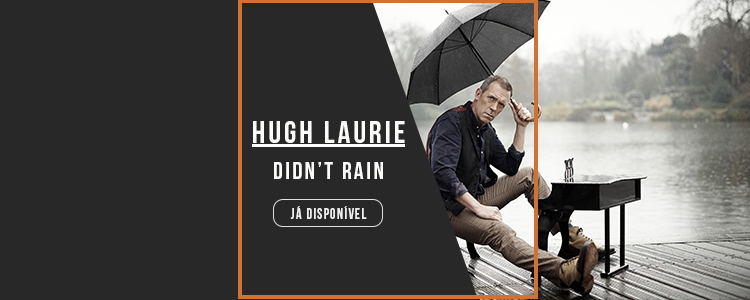
<style>
.page{position:relative;width:750px;height:300px;background:#282828}
.page>*{position:absolute;margin:0}
.t1{font:31.4px "BebasNeue";letter-spacing:0.1em;color:#fcfcfa}
.t2{font:24.3px "BebasNeue";letter-spacing:0.1em;color:#fcfcfa}
.t3{font:15.1px "BebasNeue";letter-spacing:0.1em;color:#efeeee;scale:0.9 1}
</style>
<div class="page">
<p class="t1" style="left:253px;top:121px;width:152px;height:22px">Hugh Laurie</p>
<p class="t2" style="left:274px;top:162px;width:109px;height:17px">didn’t rain</p>
<p class="t3" style="left:290px;top:206px;width:77px;height:13px">Já disponível</p>
</div>
